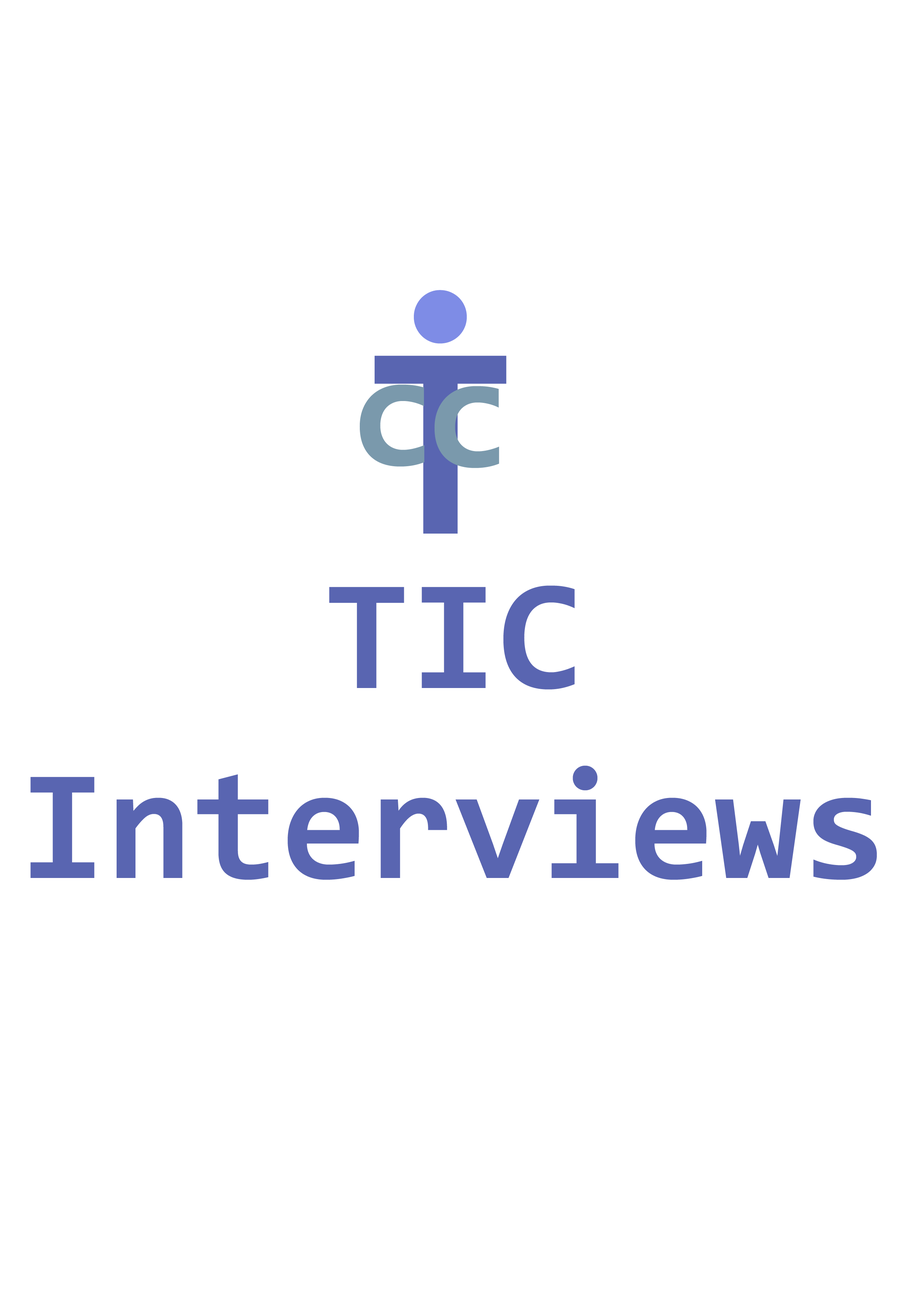
<style>
.page{position:relative;width:918px;height:1299px;background:#ffffff}
.page>*{position:absolute;margin:0}
.t1{font:278.5px "Consolas-Bold";color:#7e8ce6}
.t2{font:278.5px "Consolas-Bold";color:#5965b1}
.t3{font:159.7px "Consolas-Bold";color:#7a99ac}
.t4{font:158.1px "Consolas-Bold";color:#5965b1}
</style>
<div class="page">
<p class="t1" style="left:414px;top:290px;width:53px;height:54px">.</p>
<p class="t2" style="left:375px;top:355px;width:131px;height:178px">T</p>
<p class="t3" style="left:359px;top:384px;width:66px;height:82px">c</p>
<p class="t3" style="left:434px;top:386px;width:65px;height:82px">c</p>
<p class="t4" style="left:30px;top:585px;width:847px;height:295px;text-align:center">TIC<br>Interviews</p>
</div>
